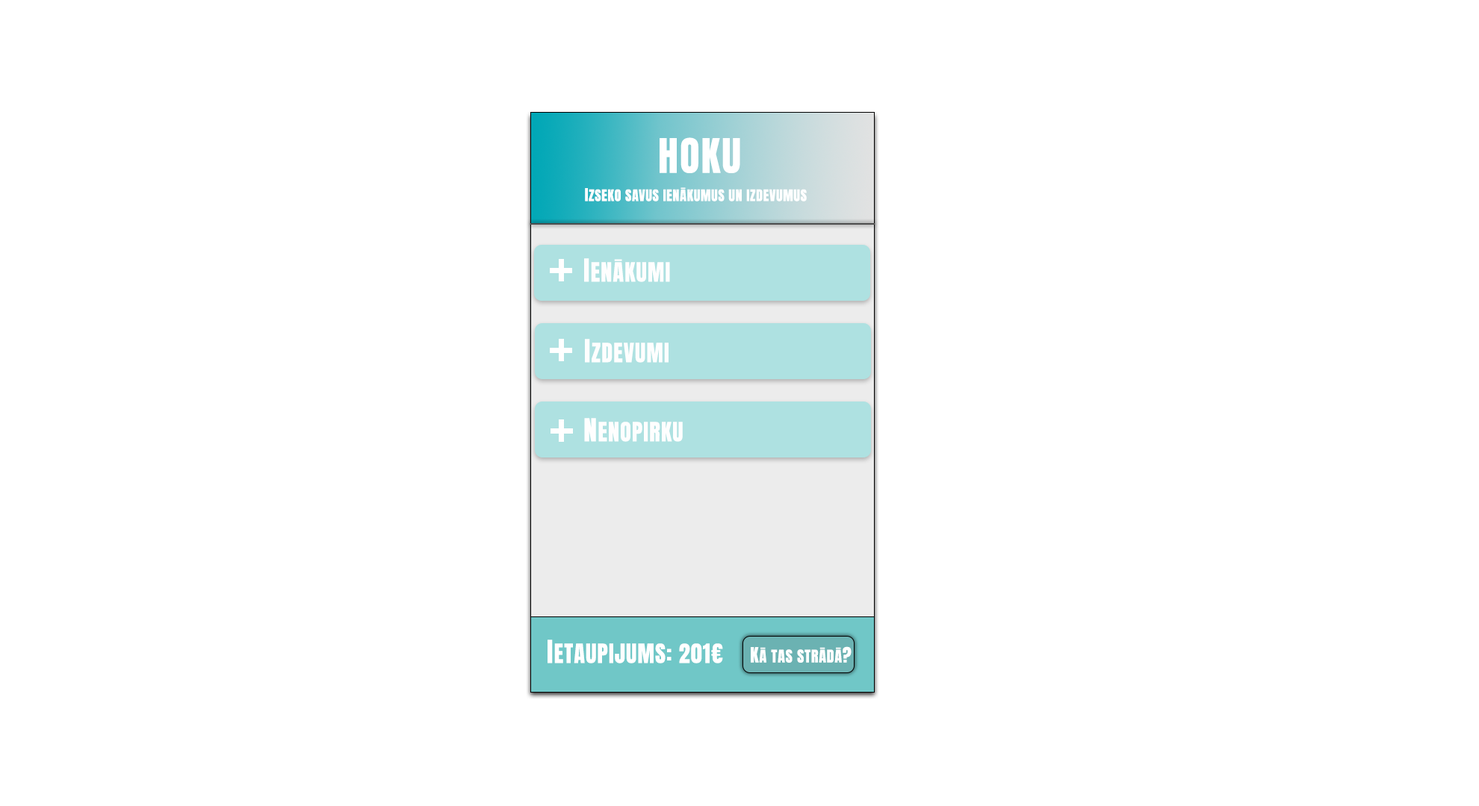
<style>
.page{position:relative;width:1479px;height:806px;background:#ffffff}
.page>*{position:absolute;margin:0}
.t1{font:40.3px "Anton-Regular";letter-spacing:0.04em;color:#ffffff;text-transform:uppercase}
.t2{font:13.4px "Anton-Regular";letter-spacing:0.04em;color:#ffffff;text-transform:uppercase}
.t3{font:14.9px "Anton-Regular";letter-spacing:0.04em;color:#ffffff;text-transform:uppercase}
.t4{font:22.4px "Anton-Regular";letter-spacing:0.04em;color:#fefefe;text-transform:uppercase}
.t5{font:26.9px "Anton-Regular";letter-spacing:0.04em;color:#fefefe;text-transform:uppercase}
.t6{font:22.4px "Anton-Regular";letter-spacing:0.04em;color:#ffffff;text-transform:uppercase}
.t7{font:26.9px "Anton-Regular";letter-spacing:0.04em;color:#ffffff;text-transform:uppercase}
.t8{font:17.9px "Anton-Regular";letter-spacing:0.04em;color:#ffffff;text-transform:uppercase}
</style>
<div class="page">
<p class="t1" style="left:659px;top:137px;width:81px;height:36px">HOKU</p>
<p class="t2" style="left:585px;top:187px;width:221px;height:15px"><span class="t3">i</span>ZSEKO SAVUS IENĀKUMUS un Izdevumus</p>
<p class="t4" style="left:584px;top:258px;width:86px;height:24px"><span class="t5">I</span>enākumi</p>
<p class="t4" style="left:585px;top:339px;width:83px;height:24px"><span class="t5">I</span>zdevumi</p>
<p class="t4" style="left:584px;top:418px;width:99px;height:24px"><span class="t5">N</span>enopirku</p>
<p class="t6" style="left:547px;top:640px;width:176px;height:24px"><span class="t7">I</span>etaupijums: 201€</p>
<p class="t3" style="left:750px;top:647px;width:101px;height:16px"><span class="t8">k</span>ā tas strādā<span class="t8">?</span></p>
</div>
